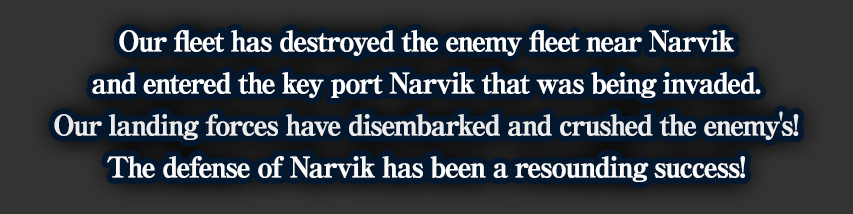
<style>
.page{position:relative;width:853px;height:214px;background:#03172f}
.page>*{position:absolute;margin:0}
.t1{font:28px/42px "RyuminPro-ExBold";letter-spacing:-0.08em;color:#ffffff;font-weight:bold}
</style>
<div class="page">
<p class="t1" style="left:54px;top:30px;width:745px;height:152px;text-align:center">Our fleet has destroyed the enemy fleet near Narvik<br>and entered the key port Narvik that was being invaded.<br>Our landing forces have disembarked and crushed the enemy's!<br>The defense of Narvik has been a resounding success!</p>
</div>
